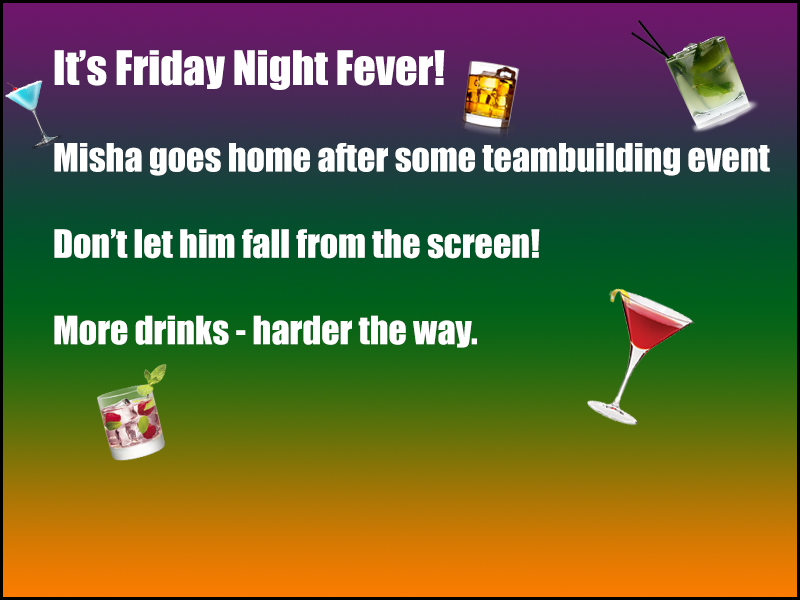
<style>
.page{position:relative;width:800px;height:600px}
.page>*{position:absolute;margin:0}
.t1{font:36px "Impact";color:#ffffff}
.t2{font:44px "Impact";color:#ffffff}
</style>
<div class="page">
<p class="t1" style="left:54px;top:50px;width:716px;height:298px"><span class="t2">It’s Friday Night Fever!<br></span><br>Misha goes home after some teambuilding event<br><br>Don’t let him fall from the screen!<br><br>More drinks - harder the way.</p>
</div>
